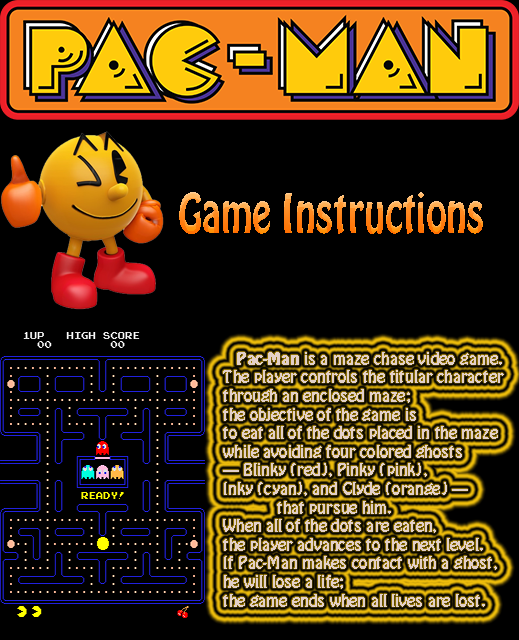
<style>
.page{position:relative;width:519px;height:640px;background:#000000}
.page>*{position:absolute;margin:0}
.t1{font:48px "HoboStd";scale:0.77 1}
.t2{font:15.5px "HoboStd";color:#e3d0c9}
.t3{font:15.5px "HoboStd";color:#e3d0c9;font-weight:bold}
</style>
<div class="page">
<p class="t1" style="left:179px;top:192px;width:304px;height:42px">Game Instructions</p>
<p class="t2" style="left:223px;top:352px;width:281px;height:255px"><span class="t3">Pac-Man </span>is a maze chase video game.<br>The player controls the titular character<br>through an enclosed maze; <br>the objective of the game is <br>to eat all of the dots placed in the maze <br>while avoiding four colored ghosts <br>— Blinky (red), Pinky (pink), <br>Inky (cyan), and Clyde (orange) — <br>            that pursue him. <br>When all of the dots are eaten, <br>the player advances to the next level. <br>If Pac-Man makes contact with a ghost, <br>he will lose a life; <br>the game ends when all lives are lost.</p>
</div>
